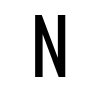
<style>
.page{position:relative;width:100px;height:100px;background:#ffffff}
.page>*{position:absolute;margin:0}
.t1{font:100px "TwCenMT-Condensed";color:#000000}
</style>
<div class="page">
<p class="t1" style="left:35px;top:15px;width:31px;height:62px">N</p>
</div>
